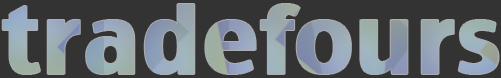
<style>
.page{position:relative;width:501px;height:78px;background:#333333}
.page>*{position:absolute;margin:0}
.t1{font:90px "CharcoalCY";letter-spacing:0.01em;color:#9babb5;font-weight:bold}
</style>
<div class="page">
<p class="t1" style="left:2px;top:4px;width:497px;height:70px">tradefours</p>
</div>
